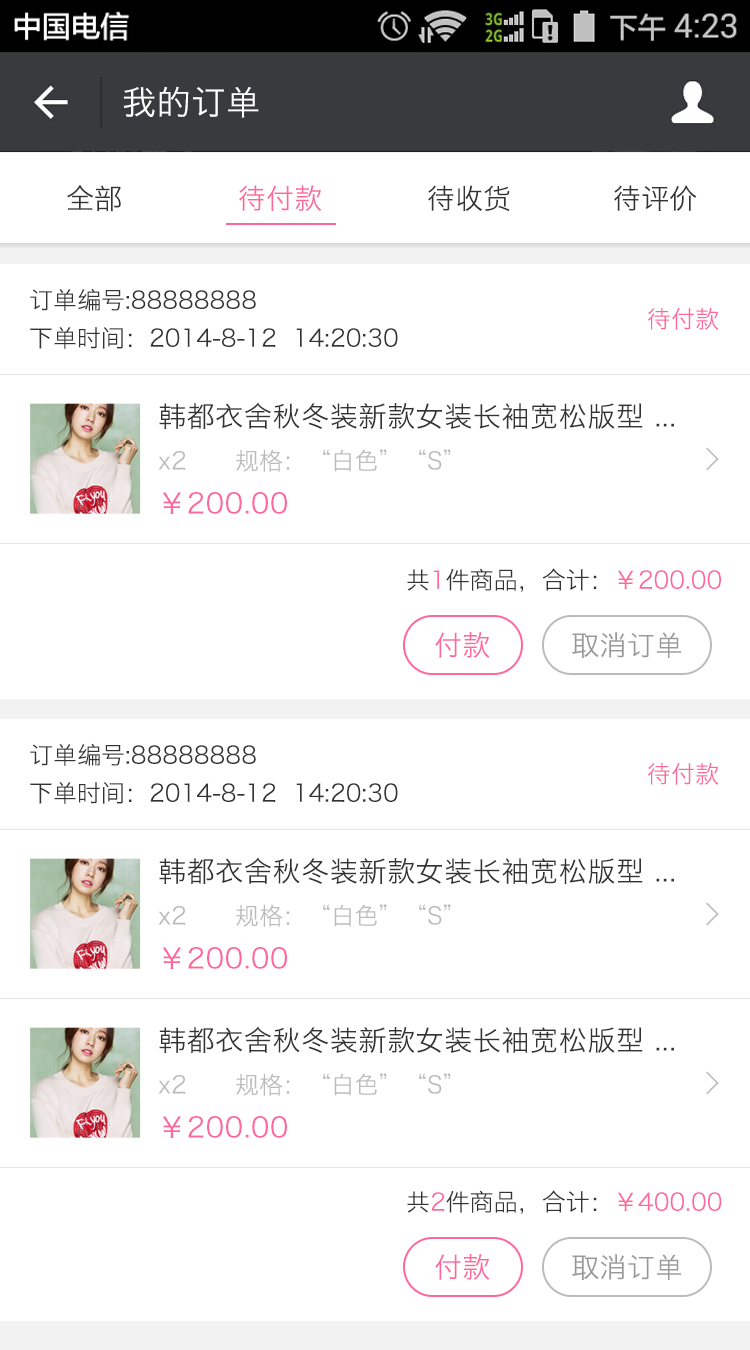
<style>
.page{position:relative;width:750px;height:1350px;background:#ffffff}
.page>*{position:absolute;margin:0}
.t1{font:34px "HiraginoSansGB-W3";letter-spacing:0.022em;color:#ffffff}
.t2{font:28px "HiraginoSansGB-W3";color:#333333}
.t3{font:28px "HiraginoSansGB-W3";color:#ff6699}
.t4{font:24px/36px "HiraginoSansGB-W3";color:#333333}
.t5{font:24px "HiraginoSansGB-W3";color:#ff6699}
.t6{font:28px "HiraginoSansGB-W3";letter-spacing:0.022em;color:#333333}
.t7{font:24px "HiraginoSansGB-W3";color:#bbbbbb}
.t8{font:32px "SimSun";color:#bbbbbb;font-weight:bold}
.t9{font:28px "HiraginoSansGB-W3";letter-spacing:0.022em;color:#ff6699}
.t10{font:24px "HiraginoSansGB-W3";color:#333333}
.t11{font:28px "HiraginoSansGB-W3";color:#999999}
</style>
<div class="page">
<p class="t1" style="left:123px;top:86px;width:136px;height:32px">我的订单</p>
<p class="t2" style="left:67px;top:185px;width:54px;height:27px">全部</p>
<p class="t3" style="left:239px;top:185px;width:83px;height:27px">待付款</p>
<p class="t2" style="left:428px;top:185px;width:82px;height:27px">待收货</p>
<p class="t2" style="left:614px;top:185px;width:83px;height:26px">待评价</p>
<p class="t4" style="left:30px;top:288px;width:368px;height:61px">订单编号:88888888<br>下单时间：2014-8-12  14:20:30</p>
<p class="t5" style="left:647px;top:307px;width:72px;height:23px">待付款</p>
<p class="t6" style="left:159px;top:402px;width:515px;height:27px">韩都衣舍秋冬装新款女装长袖宽松版型 ...</p>
<p class="t7" style="left:158px;top:449px;width:293px;height:23px">x2      规格：“白色”“S”</p>
<p class="t8" style="left:706px;top:447px;width:13px;height:24px">&gt;</p>
<p class="t9" style="left:162px;top:492px;width:125px;height:22px">￥200.00</p>
<p class="t10" style="left:407px;top:568px;width:314px;height:24px">共<span class="t5">1</span>件商品，合计：<span class="t5">￥200.00</span></p>
<p class="t3" style="left:435px;top:632px;width:55px;height:26px">付款</p>
<p class="t11" style="left:572px;top:632px;width:109px;height:26px">取消订单</p>
<p class="t4" style="left:30px;top:743px;width:368px;height:61px">订单编号:88888888<br>下单时间：2014-8-12  14:20:30</p>
<p class="t5" style="left:647px;top:762px;width:72px;height:23px">待付款</p>
<p class="t6" style="left:159px;top:857px;width:515px;height:27px">韩都衣舍秋冬装新款女装长袖宽松版型 ...</p>
<p class="t7" style="left:158px;top:904px;width:293px;height:23px">x2      规格：“白色”“S”</p>
<p class="t8" style="left:706px;top:902px;width:13px;height:24px">&gt;</p>
<p class="t9" style="left:162px;top:947px;width:125px;height:22px">￥200.00</p>
<p class="t6" style="left:159px;top:1026px;width:515px;height:27px">韩都衣舍秋冬装新款女装长袖宽松版型 ...</p>
<p class="t7" style="left:158px;top:1073px;width:293px;height:23px">x2      规格：“白色”“S”</p>
<p class="t8" style="left:706px;top:1071px;width:13px;height:24px">&gt;</p>
<p class="t9" style="left:162px;top:1116px;width:125px;height:22px">￥200.00</p>
<p class="t10" style="left:407px;top:1190px;width:315px;height:24px">共<span class="t5">2</span>件商品，合计：<span class="t5">￥400.00</span></p>
<p class="t3" style="left:435px;top:1254px;width:55px;height:26px">付款</p>
<p class="t11" style="left:572px;top:1254px;width:109px;height:26px">取消订单</p>
</div>
